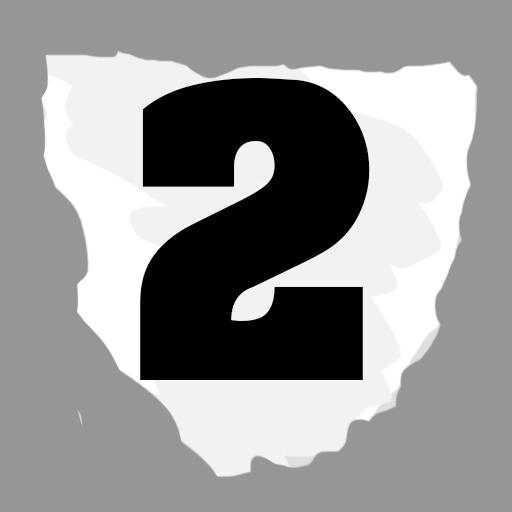
<style>
.page{position:relative;width:512px;height:512px;background:#979696}
.page>*{position:absolute;margin:0}
.t1{font:460.2px "VNI-Auchon-Bold";letter-spacing:-0.015em;color:#000000}
</style>
<div class="page">
<p class="t1" style="left:140px;top:78px;width:230px;height:302px">2</p>
</div>
